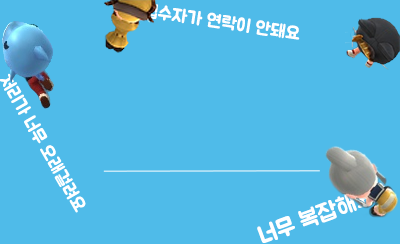
<style>
.page{position:relative;width:400px;height:244px;background:#4fbbe9}
.page>*{position:absolute;margin:0}
.t1{font:18px "BMJUA";letter-spacing:0.005em;color:#ffffff}
.t2{font:24px "BMJUA";letter-spacing:0.005em;color:#ffffff}
</style>
<div class="page">
<p class="t1" style="left:144px;top:3px;width:156px;height:37px;rotate:9deg">접수자가 연락이 안돼요</p>
<p class="t2" style="left:257px;top:187px;width:119px;height:56px;rotate:-20deg">너무 복잡해요</p>
</div>
